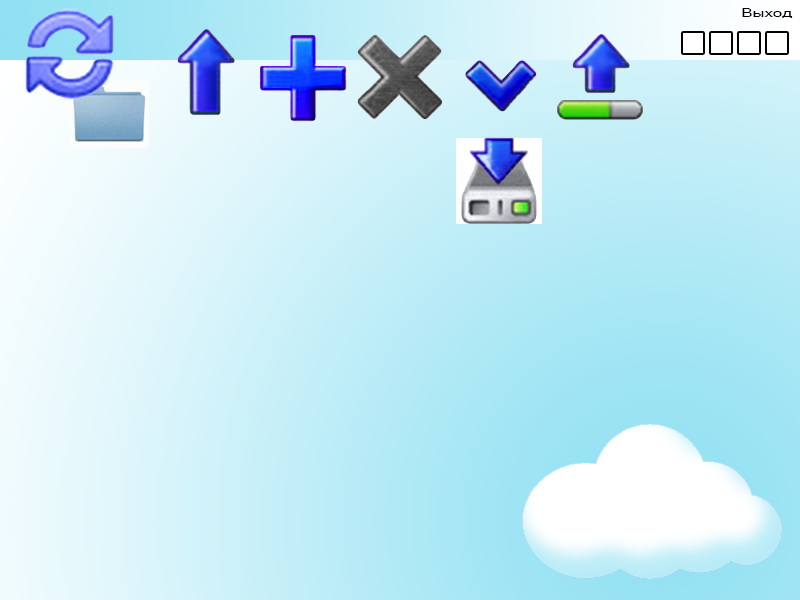
<style>
.page{position:relative;width:800px;height:600px}
.page>*{position:absolute;margin:0}
.t1{font:12px "MicrosoftSansSerif";color:#000000;scale:1.4 1}
</style>
<div class="page">
<p class="t1" style="left:742px;top:8px;width:51px;height:10px">Выход</p>
</div>
